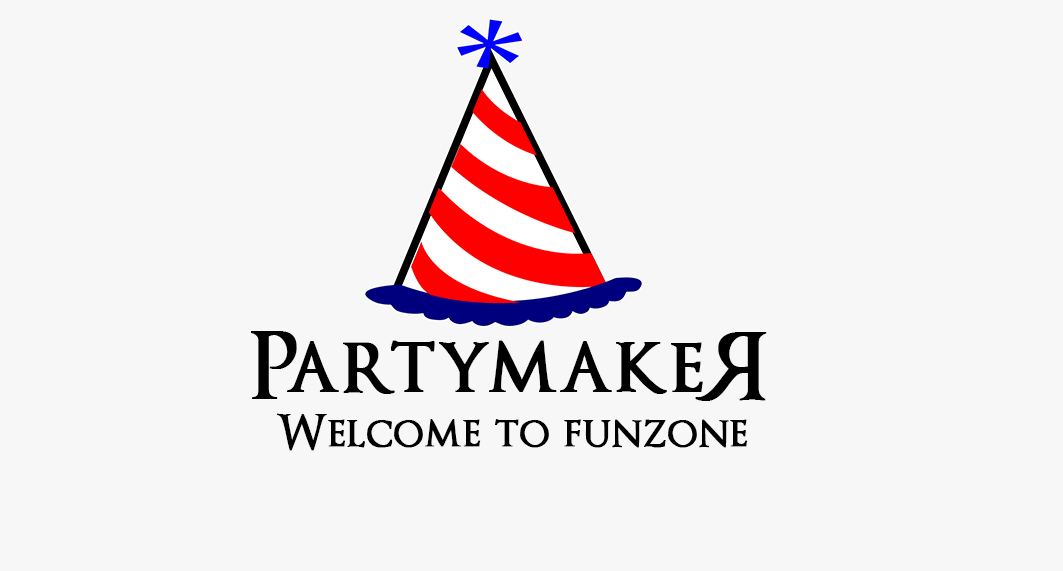
<style>
.page{position:relative;width:1063px;height:571px;background:#f7f7f7}
.page>*{position:absolute;margin:0}
.t1{font:90px "OptimusPrincepsCyr";color:#000000;font-weight:bold}
.t2{font:90.3px "OptimusPrincepsCyr";color:#000000;font-weight:bold}
.t3{font:48px "OptimusPrincepsCyr";color:#000000;font-weight:bold}
</style>
<div class="page">
<p class="t1" style="left:251px;top:331px;width:452px;height:68px">Partymake</p>
<p class="t2" style="left:695px;top:332px;width:72px;height:69px;rotate:180deg">R</p>
<p class="t3" style="left:277px;top:413px;width:471px;height:38px">Welcome to funzone</p>
</div>
